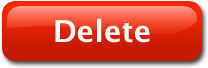
<style>
.page{position:relative;width:208px;height:68px}
.page>*{position:absolute;margin:0}
.t1{font:30px "LucidaGrande-Bold";color:#ffffff}
</style>
<div class="page">
<p class="t1" style="left:55px;top:18px;width:95px;height:25px">Delete</p>
</div>
